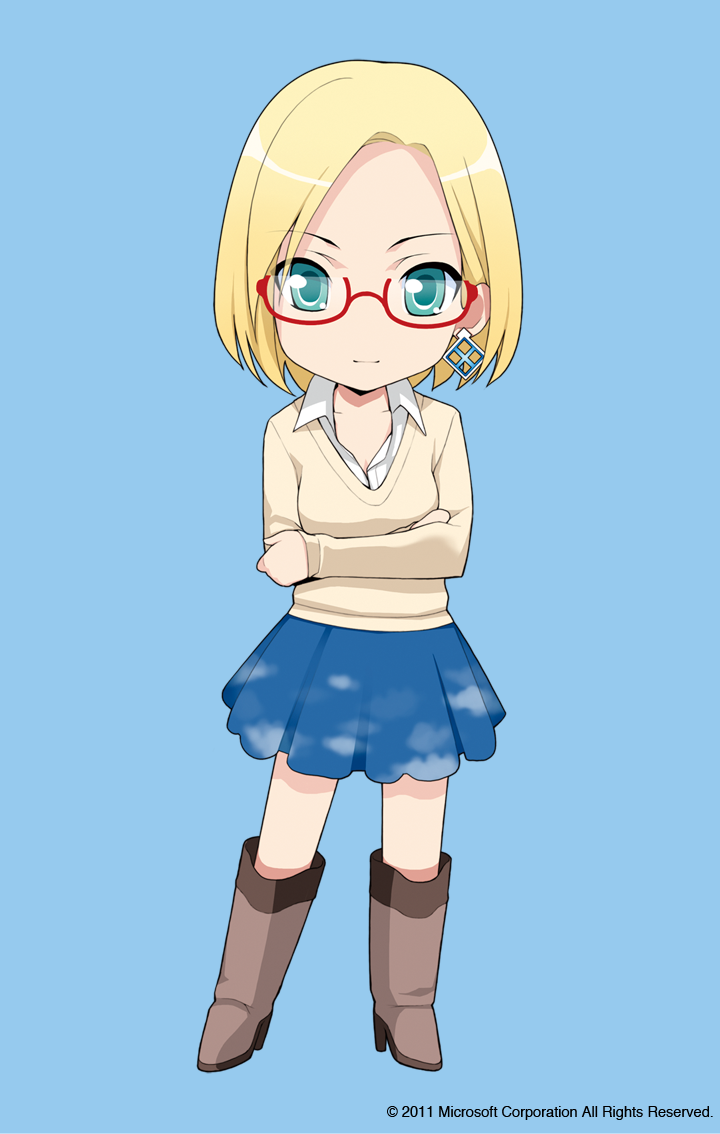
<style>
.page{position:relative;width:720px;height:1134px;background:#96caee}
.page>*{position:absolute;margin:0}
.t1{font:14.6px "Helvetica";color:#000000}
</style>
<div class="page">
<p class="t1" style="left:387px;top:1106px;width:326px;height:14px">© 2011 Microsoft Corporation All Rights Reserved.</p>
</div>
